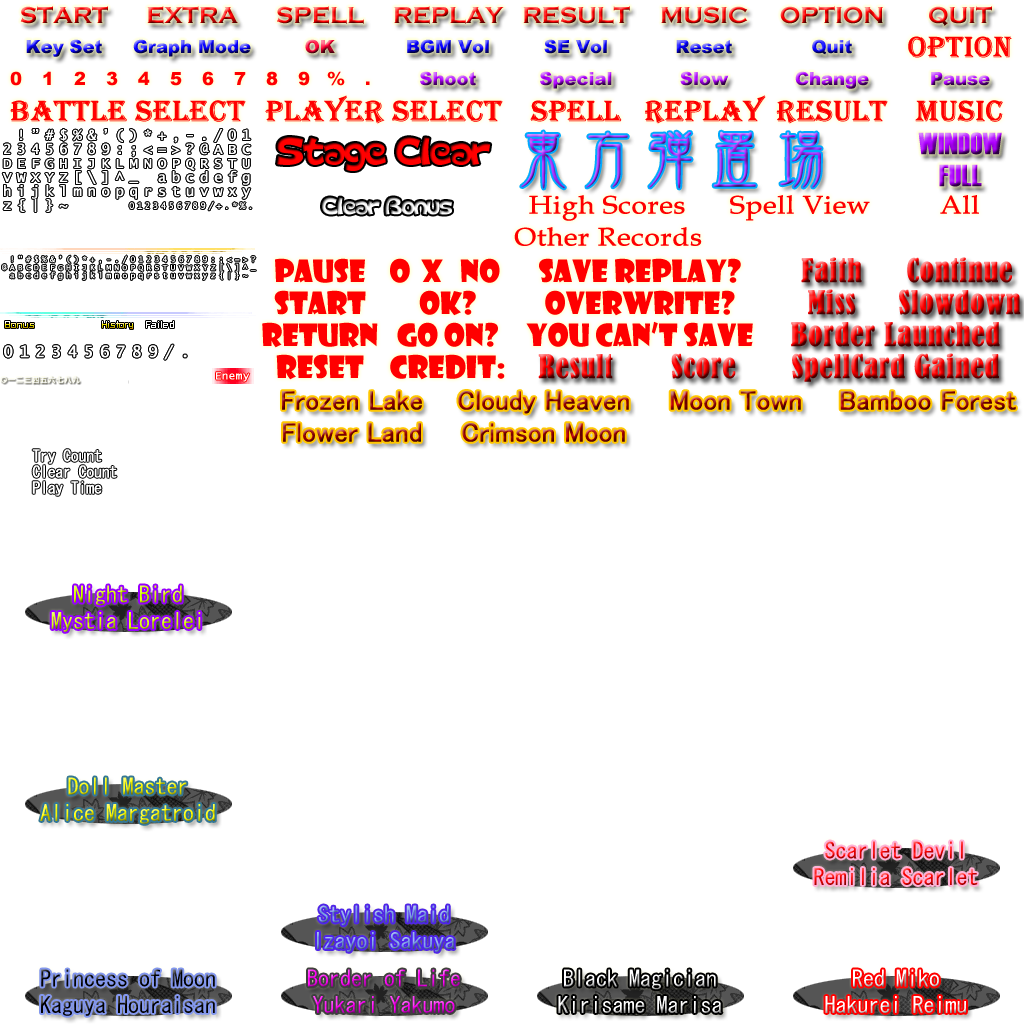
<style>
.page{position:relative;width:1024px;height:1024px;background:#ffffff}
.page>*{position:absolute;margin:0}
.t1{font:24px "CopperplateGothic-Bold"}
.t2{font:18px "Arial-Black"}
.t3{font:30px "Algerian";color:#ff0000;font-weight:bold}
.t4{font:18px "Arial-Black";color:#ff0000}
.t5{font:34.2px "ColopocleAlphabet";letter-spacing:-0.08em;color:#ff0000;scale:0.95 1}
.t6{font:60.5px "DFKinBun-W3-WIN-RKSJ-H";font-weight:bold;scale:1.09 1}
.t7{font:30px "Haettenschweiler";font-weight:bold}
.t8{font:20.9px "ColopocleAlphabet";letter-spacing:-0.08em;scale:0.95 1}
.t9{font:25.2px "BookAntiqua";color:#ff0000;font-weight:bold;scale:1.11 1}
.t10{font:30px "BernardMT-Condensed";font-weight:bold}
.t11{font:30px "ShowcardGothic-Reg";color:#ff0000}
.t12{font:7px "MicrosoftYaHei";letter-spacing:0.15em;color:#ffffff}
.t13{font:11px "LucidaConsole";color:#ffffff;font-weight:bold}
.t14{font:27px "MS-UIGothic";font-weight:bold}
.t15{font:22px "MS-Gothic"}
</style>
<div class="page">
<p class="t1" style="left:20px;top:6px;width:88px;height:18px">START</p>
<p class="t1" style="left:147px;top:6px;width:91px;height:18px">EXTRA</p>
<p class="t1" style="left:277px;top:6px;width:87px;height:18px">SPELL</p>
<p class="t1" style="left:394px;top:6px;width:110px;height:18px">REPLAY</p>
<p class="t1" style="left:523px;top:6px;width:107px;height:18px">RESULT</p>
<p class="t1" style="left:661px;top:6px;width:87px;height:18px">MUSIC</p>
<p class="t1" style="left:780px;top:6px;width:103px;height:18px">OPTION</p>
<p class="t1" style="left:929px;top:6px;width:63px;height:20px">QUIT</p>
<p class="t2" style="left:26px;top:39px;width:76px;height:18px">Key Set</p>
<p class="t2" style="left:133px;top:39px;width:118px;height:18px">Graph Mode</p>
<p class="t2" style="left:305px;top:39px;width:30px;height:15px">OK</p>
<p class="t2" style="left:407px;top:39px;width:82px;height:15px">BGM Vol</p>
<p class="t2" style="left:544px;top:39px;width:63px;height:15px">SE Vol</p>
<p class="t2" style="left:676px;top:40px;width:56px;height:14px">Reset</p>
<p class="t2" style="left:812px;top:39px;width:40px;height:16px">Quit</p>
<p class="t3" style="left:908px;top:36px;width:104px;height:22px">Option</p>
<p class="t4" style="left:10px;top:71px;width:12px;height:15px">0</p>
<p class="t4" style="left:43px;top:71px;width:8px;height:14px">1</p>
<p class="t4" style="left:74px;top:71px;width:11px;height:14px">2</p>
<p class="t4" style="left:106px;top:71px;width:12px;height:15px">3</p>
<p class="t4" style="left:138px;top:71px;width:12px;height:14px">4</p>
<p class="t4" style="left:170px;top:72px;width:12px;height:14px">5</p>
<p class="t4" style="left:202px;top:71px;width:12px;height:15px">6</p>
<p class="t4" style="left:234px;top:72px;width:12px;height:13px">7</p>
<p class="t4" style="left:266px;top:71px;width:12px;height:15px">8</p>
<p class="t4" style="left:298px;top:71px;width:12px;height:15px">9</p>
<p class="t4" style="left:327px;top:71px;width:18px;height:15px">%</p>
<p class="t2" style="left:420px;top:71px;width:56px;height:15px">Shoot</p>
<p class="t2" style="left:540px;top:71px;width:72px;height:18px">Special</p>
<p class="t2" style="left:680px;top:71px;width:49px;height:15px">Slow</p>
<p class="t2" style="left:795px;top:71px;width:74px;height:18px">Change</p>
<p class="t2" style="left:931px;top:72px;width:59px;height:14px">Pause</p>
<p class="t4" style="left:366px;top:81px;width:4px;height:4px">.</p>
<p class="t3" style="left:10px;top:100px;width:236px;height:22px">Battle Select</p>
<p class="t3" style="left:265px;top:95px;width:238px;height:29px">Player Select</p>
<p class="t3" style="left:530px;top:100px;width:92px;height:22px">Spell</p>
<p class="t3" style="left:645px;top:95px;width:121px;height:29px">Replay</p>
<p class="t3" style="left:776px;top:100px;width:112px;height:24px">Result</p>
<p class="t3" style="left:915px;top:100px;width:88px;height:22px">Music</p>
<p class="t5" style="left:277px;top:137px;width:214px;height:34px">Stage Clear</p>
<p class="t6" style="left:521px;top:131px;width:44px;height:58px">東</p>
<p class="t6" style="left:586px;top:132px;width:42px;height:56px">方</p>
<p class="t6" style="left:649px;top:131px;width:43px;height:58px">弾</p>
<p class="t6" style="left:713px;top:131px;width:43px;height:56px">置</p>
<p class="t6" style="left:780px;top:132px;width:42px;height:56px">場</p>
<p class="t7" style="left:918px;top:132px;width:84px;height:23px">WINDOW</p>
<p class="t7" style="left:939px;top:164px;width:43px;height:23px">FULL</p>
<p class="t8" style="left:322px;top:197px;width:130px;height:18px">Clear Bonus</p>
<p class="t9" style="left:529px;top:195px;width:156px;height:26px">High Scores</p>
<p class="t9" style="left:730px;top:195px;width:140px;height:26px">Spell View</p>
<p class="t9" style="left:940px;top:195px;width:39px;height:19px">All</p>
<p class="t9" style="left:514px;top:227px;width:188px;height:19px">Other Records</p>
<p class="t10" style="left:801px;top:257px;width:61px;height:26px">Faith</p>
<p class="t10" style="left:907px;top:257px;width:105px;height:26px">Continue</p>
<p class="t11" style="left:275px;top:258px;width:90px;height:25px">PAUSE</p>
<p class="t11" style="left:390px;top:258px;width:20px;height:25px">O</p>
<p class="t11" style="left:421px;top:259px;width:22px;height:23px">X</p>
<p class="t11" style="left:460px;top:258px;width:40px;height:25px">NO</p>
<p class="t11" style="left:539px;top:258px;width:202px;height:26px">Save Replay?</p>
<p class="t11" style="left:274px;top:290px;width:92px;height:26px">Start</p>
<p class="t11" style="left:419px;top:290px;width:57px;height:26px">OK?</p>
<p class="t11" style="left:545px;top:290px;width:190px;height:26px">OverWrite?</p>
<p class="t10" style="left:808px;top:289px;width:48px;height:26px">Miss</p>
<p class="t10" style="left:899px;top:289px;width:122px;height:26px">Slowdown</p>
<p class="t11" style="left:262px;top:322px;width:116px;height:26px">Return</p>
<p class="t11" style="left:397px;top:322px;width:101px;height:25px">Go On?</p>
<p class="t11" style="left:526px;top:321px;width:227px;height:26px">You Can’t Save</p>
<p class="t10" style="left:791px;top:322px;width:209px;height:25px">Border Launched</p>
<p class="t10" style="left:671px;top:353px;width:65px;height:26px">Score</p>
<p class="t10" style="left:792px;top:353px;width:207px;height:29px">SpellCard Gained</p>
<p class="t11" style="left:276px;top:354px;width:88px;height:26px">Reset</p>
<p class="t11" style="left:390px;top:354px;width:115px;height:26px">Credit:</p>
<p class="t10" style="left:538px;top:354px;width:75px;height:25px">Result</p>
<p class="t12" style="left:1px;top:376px;width:79px;height:8px">〇一二三四五六七八九</p>
<p class="t12" style="left:1px;top:376px;width:79px;height:8px">〇一二三四五六七八九</p>
<p class="t12" style="left:1px;top:376px;width:79px;height:8px">〇一二三四五六七八九</p>
<p class="t13" style="left:216px;top:372px;width:34px;height:10px">Enemy</p>
<p class="t14" style="left:282px;top:391px;width:140px;height:19px">Frozen Lake</p>
<p class="t14" style="left:458px;top:391px;width:171px;height:23px">Cloudy Heaven</p>
<p class="t14" style="left:670px;top:391px;width:131px;height:19px">Moon Town</p>
<p class="t14" style="left:840px;top:391px;width:176px;height:19px">Bamboo Forest</p>
<p class="t14" style="left:283px;top:423px;width:138px;height:19px">Flower Land</p>
<p class="t14" style="left:462px;top:423px;width:163px;height:19px">Crimson Moon</p>
<p class="t15" style="left:51px;top:585px;width:150px;height:47px;text-align:center">Night Bird<br>Mystia Lorelei</p>
<p class="t15" style="left:40px;top:777px;width:175px;height:47px;text-align:center">Doll Master<br>Alice Margatroid</p>
<p class="t15" style="left:814px;top:841px;width:164px;height:44px;text-align:center">Scarlet Devil<br>Remilia Scarlet</p>
<p class="t15" style="left:317px;top:905px;width:138px;height:47px;text-align:center">Stylish Maid<br>Izayoi Sakuya</p>
<p class="t15" style="left:41px;top:969px;width:174px;height:47px;text-align:center">Princess of Moon<br>Kaguya Houraisan</p>
<p class="t15" style="left:308px;top:969px;width:152px;height:44px;text-align:center">Border of Life<br>Yukari Yakumo</p>
<p class="t15" style="left:558px;top:969px;width:164px;height:44px;text-align:center">Black Magician<br>Kirisame Marisa</p>
<p class="t15" style="left:825px;top:969px;width:141px;height:44px;text-align:center">Red Miko<br>Hakurei Reimu</p>
</div>
